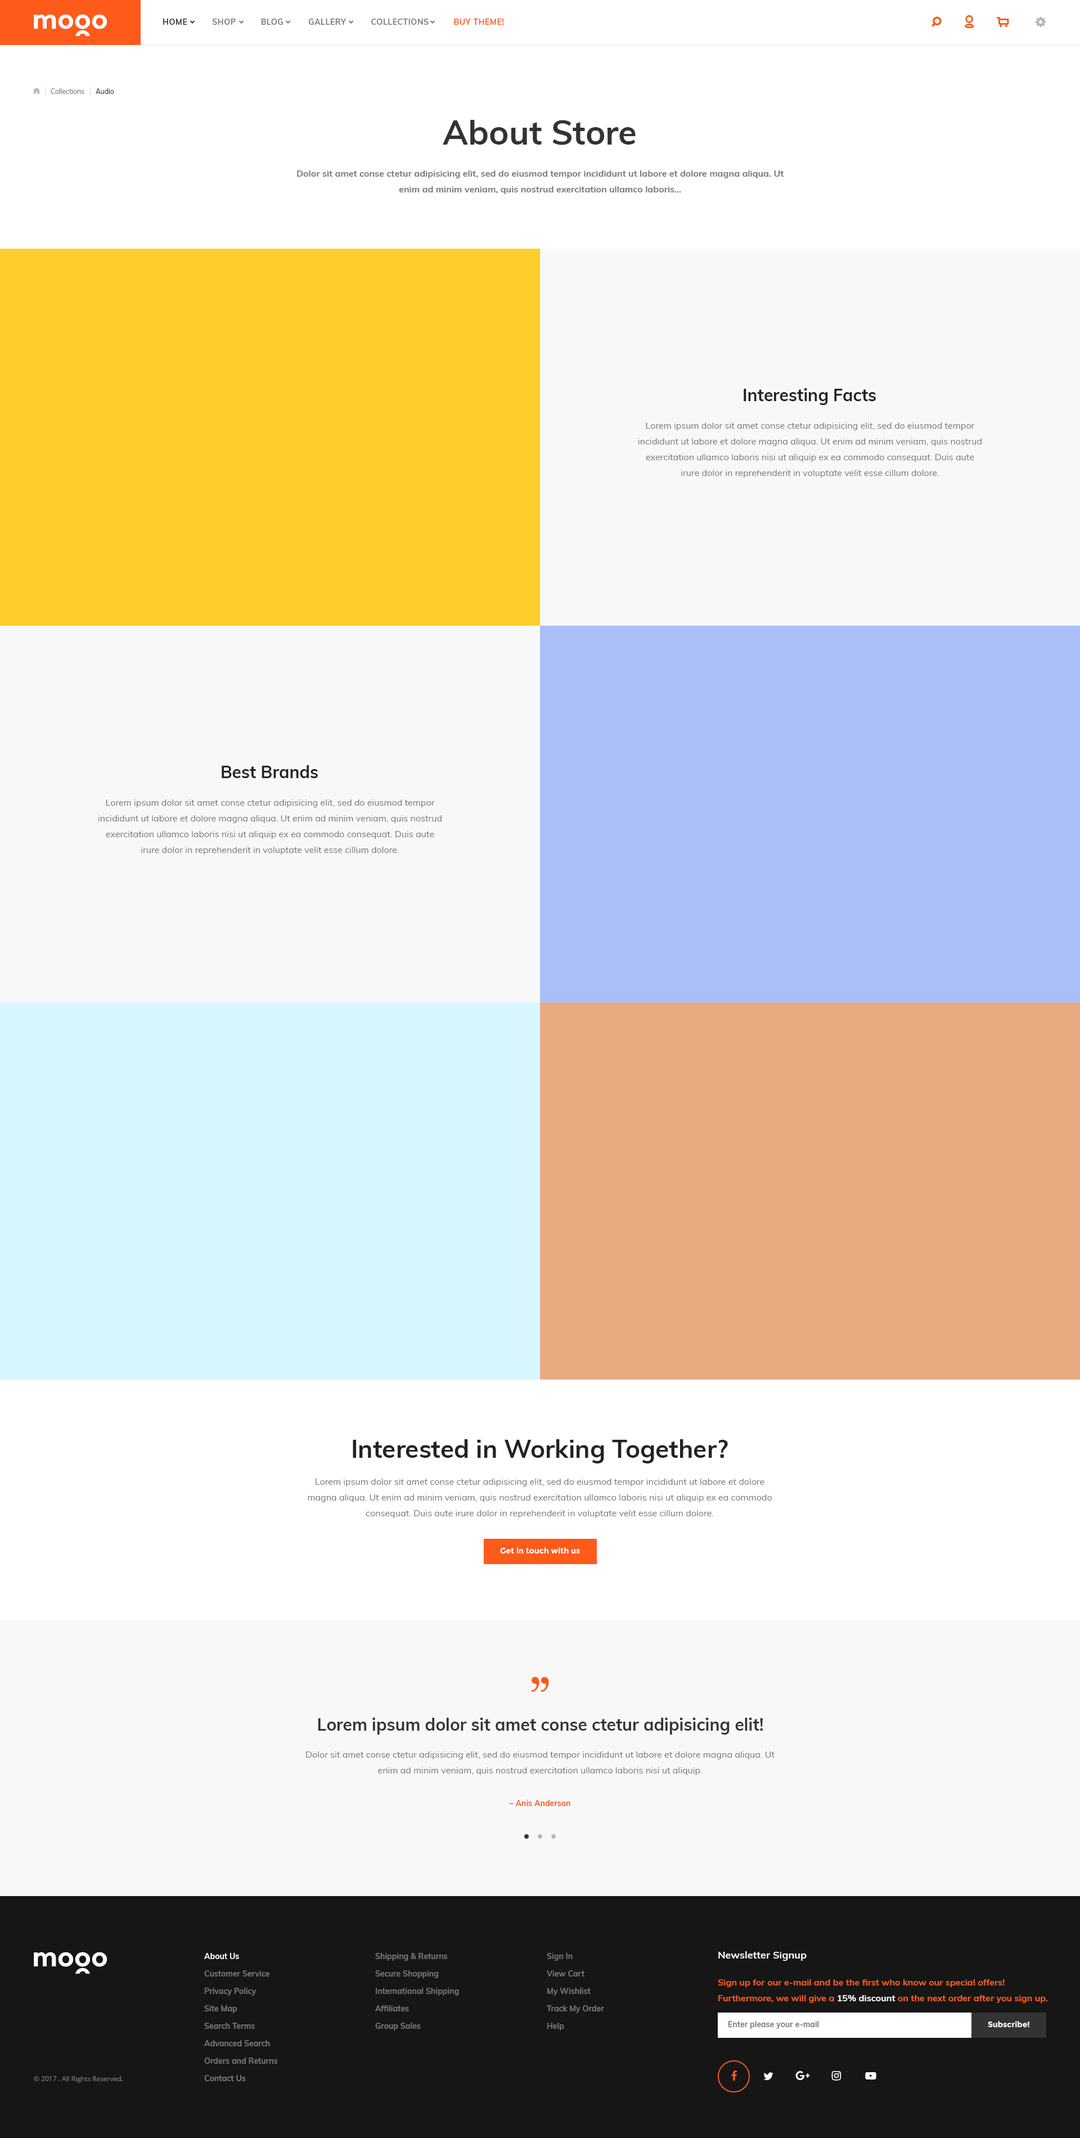
<style>
.page{position:relative;width:1080px;height:2138px;background:#f8f8f8}
.page>*{position:absolute;margin:0}
.t1{font:7.9px "Muli-Bold";letter-spacing:0.04em;color:#777777;text-transform:uppercase}
.t2{font:7.9px "Muli-Bold";letter-spacing:0.04em;color:#333333;text-transform:uppercase}
.t3{font:7.9px "Muli-Bold";letter-spacing:0.04em;color:#fe5a1a;text-transform:uppercase}
.t4{font:6.8px "Muli-Regular";color:#777777}
.t5{font:6.8px "Muli-Regular";color:#333333}
.t6{font:33.8px "Muli-Bold";color:#333333}
.t7{font:9px/15.8px "Muli-Bold";color:#777777}
.t8{font:16.9px "Muli-Bold";color:#222222}
.t9{font:9px/15.8px "Muli-Regular";color:#777777}
.t10{font:24.8px "Muli-Bold";color:#222222}
.t11{font:7.9px "Montserrat-Bold";color:#ffffff}
.t12{font:16.9px "Muli-Bold";color:#333333}
.t13{font:7.9px "Muli-Bold";color:#fe5a1a}
.t14{font:25.9px "Montserrat-Bold";color:#ffffff}
.t15{font:7.9px/17.4px "Muli-Bold";color:#777777}
.t16{font:7.9px/17.4px "Muli-Bold";color:#ffffff}
.t17{font:10.1px "Muli-Bold";color:#ffffff}
.t18{font:9px/15.8px "Muli-Bold";color:#fe5a1a}
.t19{font:9px/15.8px "Muli-Bold";color:#ffffff}
.t20{font:7.9px "Muli-Bold";color:#777777}
.t21{font:6.8px "OpenSans";color:#777777}
</style>
<div class="page">
<p class="t1" style="left:163px;top:19px;width:341px;height:6px"><span class="t2">hOME    </span>      Shop          bLOG          gALLERY          Collections          <span class="t3">BUY THEME!</span></p>
<p class="t4" style="left:51px;top:88px;width:33px;height:6px">Collections</p>
<p class="t5" style="left:96px;top:88px;width:18px;height:6px">Audio</p>
<p class="t6" style="left:443px;top:120px;width:193px;height:25px">About Store</p>
<p class="t7" style="left:297px;top:170px;width:487px;height:24px;text-align:center">Dolor sit amet conse ctetur adipisicing elit, sed do eiusmod tempor incididunt ut labore et dolore magna aliqua. Ut enim ad minim veniam, quis nostrud exercitation ullamco laboris...</p>
<p class="t8" style="left:744px;top:388px;width:132px;height:17px">Interesting Facts</p>
<p class="t9" style="left:638px;top:422px;width:344px;height:56px;text-align:center">Lorem ipsum dolor sit amet conse ctetur adipisicing elit, sed do eiusmod tempor incididunt ut labore et dolore magna aliqua. Ut enim ad minim veniam, quis nostrud exercitation ullamco laboris nisi ut aliquip ex ea commodo consequat. Duis aute irure dolor in reprehenderit in voluptate velit esse cillum dolore.</p>
<p class="t8" style="left:222px;top:765px;width:96px;height:13px">Best Brands</p>
<p class="t9" style="left:98px;top:799px;width:344px;height:55px;text-align:center">Lorem ipsum dolor sit amet conse ctetur adipisicing elit, sed do eiusmod tempor incididunt ut labore et dolore magna aliqua. Ut enim ad minim veniam, quis nostrud exercitation ullamco laboris nisi ut aliquip ex ea commodo consequat. Duis aute irure dolor in reprehenderit in voluptate velit esse cillum dolore.</p>
<p class="t10" style="left:353px;top:1439px;width:375px;height:24px">Interested in Working Together?</p>
<p class="t9" style="left:308px;top:1478px;width:464px;height:40px;text-align:center">Lorem ipsum dolor sit amet conse ctetur adipisicing elit, sed do eiusmod tempor incididunt ut labore et dolore magna aliqua. Ut enim ad minim veniam, quis nostrud exercitation ullamco laboris nisi ut aliquip ex ea commodo consequat. Duis aute irure dolor in reprehenderit in voluptate velit esse cillum dolore.</p>
<p class="t11" style="left:500px;top:1547px;width:80px;height:7px">Get in touch with us</p>
<p class="t12" style="left:318px;top:1717px;width:445px;height:17px">Lorem ipsum dolor sit amet conse ctetur adipisicing elit!</p>
<p class="t9" style="left:306px;top:1751px;width:469px;height:24px;text-align:center">Dolor sit amet conse ctetur adipisicing elit, sed do eiusmod tempor incididunt ut labore et dolore magna aliqua. Ut enim ad minim veniam, quis nostrud exercitation ullamco laboris nisi ut aliquip.</p>
<p class="t13" style="left:509px;top:1799px;width:61px;height:7px">– Anis Anderson</p>
<p class="t14" style="left:34px;top:1951px;width:73px;height:15px">mooo</p>
<p class="t15" style="left:204px;top:1952px;width:73px;height:129px"><span class="t16">About Us<br></span>Customer Service<br>Privacy Policy<br>Site Map<br>Search Terms<br>Advanced Search<br>Orders and Returns<br>Contact Us</p>
<p class="t15" style="left:375px;top:1952px;width:84px;height:78px">Shipping &amp; Returns<br>Secure Shopping<br>International Shipping<br>Affiliates<br>Group Sales</p>
<p class="t15" style="left:546px;top:1952px;width:58px;height:78px">Sign In<br>View Cart<br>My Wishlist<br>Track My Order<br>Help</p>
<p class="t17" style="left:718px;top:1951px;width:89px;height:9px">Newsletter Signup</p>
<p class="t18" style="left:718px;top:1979px;width:330px;height:24px">Sign up for our e-mail and be the first who know our special offers! <br>Furthermore, we will give a <span class="t19">15% discount</span> on the next order after you sign up.</p>
<p class="t20" style="left:728px;top:2020px;width:91px;height:9px">Enter please your e-mail</p>
<p class="t11" style="left:988px;top:2020px;width:41px;height:7px">Subscribe!</p>
<p class="t21" style="left:34px;top:2076px;width:89px;height:6px">© 2017 . All Rights Reserved.</p>
</div>
